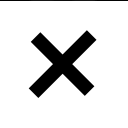
<style>
.page{position:relative;width:128px;height:128px;background:#ffffff}
.page>*{position:absolute;margin:0}
.t1{font:166.7px "ZXX-Sans";letter-spacing:0.06em;color:#000000}
</style>
<div class="page">
<p class="t1" style="left:28px;top:29px;width:69px;height:68px;rotate:45deg">+</p>
</div>
